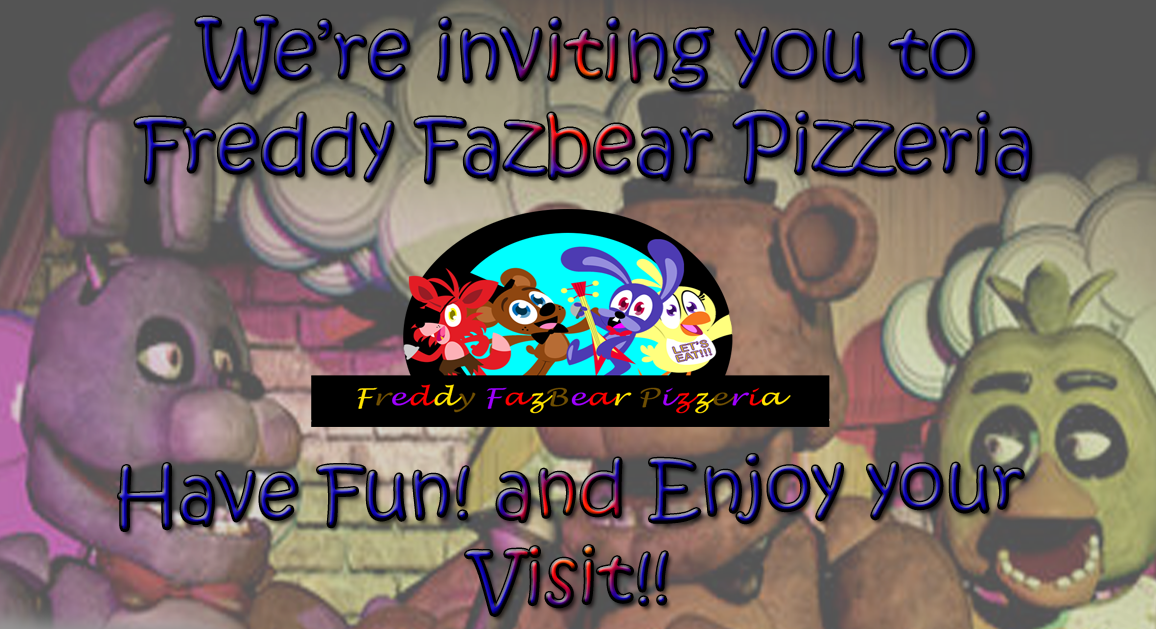
<style>
.page{position:relative;width:1156px;height:629px}
.page>*{position:absolute;margin:0}
.t1{font:78px "KristenITC-Regular"}
.t2{font:73.8px "KristenITC-Regular"}
</style>
<div class="page">
<p class="t1" style="left:135px;top:16px;width:896px;height:167px;text-align:center">We’re inviting you to <br>Freddy Fazbear Pizzeria</p>
<p class="t2" style="left:118px;top:454px;width:906px;height:162px;rotate:-1deg">Have Fun! and Enjoy your Visit!!</p>
</div>
